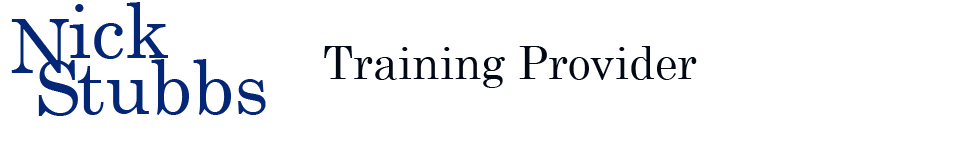
<style>
.page{position:relative;width:968px;height:150px;background:#ffffff}
.page>*{position:absolute;margin:0}
.t1{font:75px "CenturySchoolbook";color:#032676}
.t2{font:45px "CenturySchoolbook";color:#020814}
</style>
<div class="page">
<p class="t1" style="left:69px;top:2px;width:99px;height:57px">ick</p>
<p class="t1" style="left:11px;top:19px;width:58px;height:54px">N</p>
<p class="t2" style="left:324px;top:46px;width:373px;height:42px">Training Provider</p>
<p class="t1" style="left:38px;top:60px;width:40px;height:56px">S</p>
<p class="t1" style="left:77px;top:59px;width:189px;height:56px">tubbs</p>
</div>
